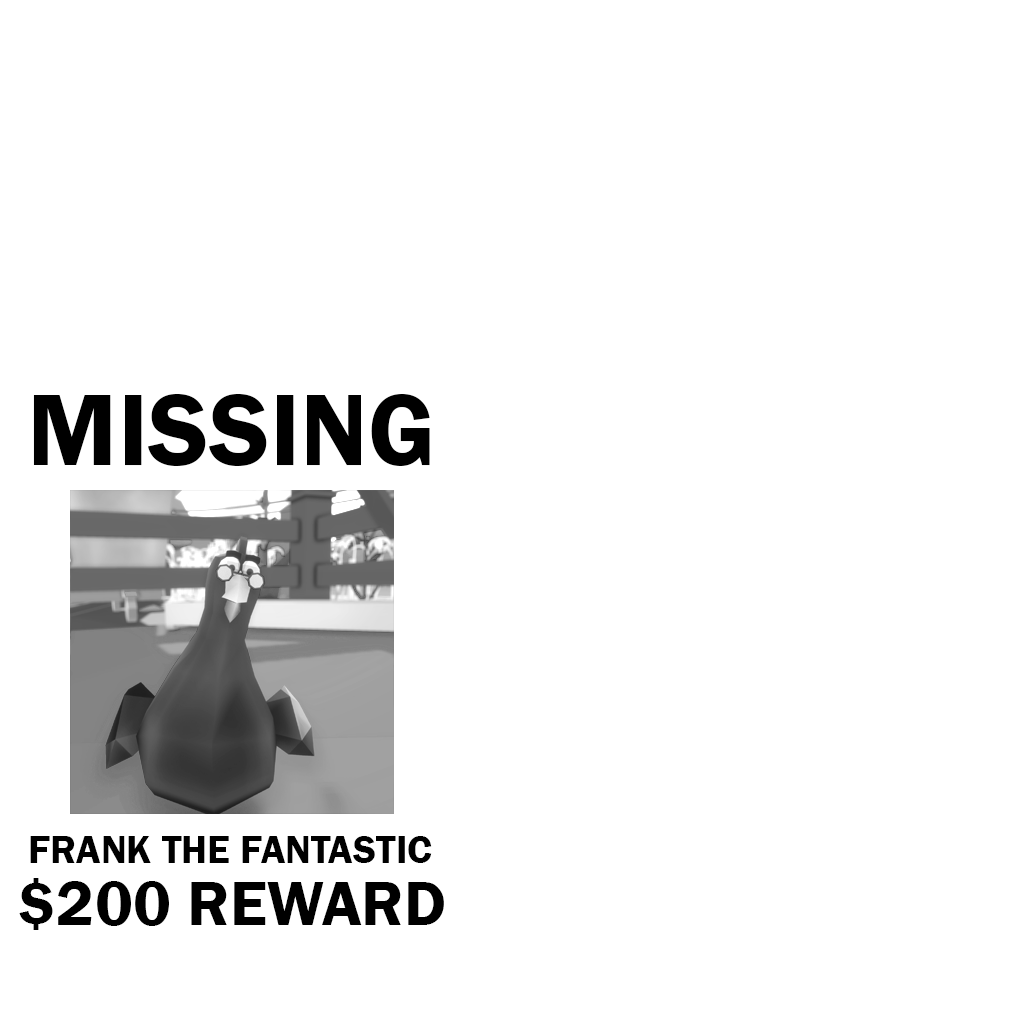
<style>
.page{position:relative;width:1024px;height:1024px;background:#ffffff}
.page>*{position:absolute;margin:0}
.t1{font:105px "FranklinGothic-Demi";color:#000000}
.t2{font:40px "FranklinGothic-Demi";color:#000000}
.t3{font:65px "FranklinGothic-Demi";color:#000000}
</style>
<div class="page">
<p class="t1" style="left:33px;top:394px;width:397px;height:72px">MISSING</p>
<p class="t2" style="left:30px;top:836px;width:402px;height:27px">FRANK THE FANTASTIC</p>
<p class="t3" style="left:19px;top:878px;width:425px;height:52px">$200 REWARD</p>
</div>
